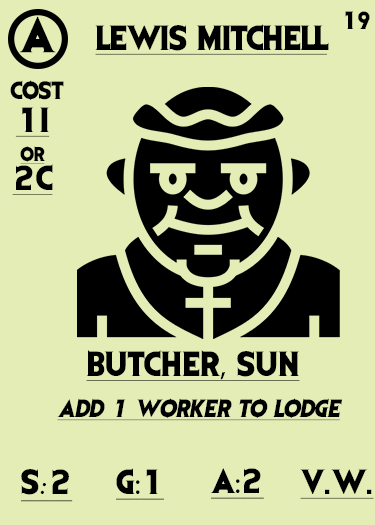
<style>
.page{position:relative;width:375px;height:525px;background:#e3edb5}
.page>*{position:absolute;margin:0}
.t1{font:41.7px "EvilDead";letter-spacing:-0.05em;color:#000000}
.t2{font:20.8px "EvilDead";letter-spacing:-0.1em;color:#000000}
.t3{font:29.2px "EvilDead";letter-spacing:-0.025em;color:#000000;text-decoration:underline}
.t4{font:20.8px "EvilDead";color:#000000}
.t5{font:29.2px/29.2px "EvilDead";color:#000000;text-decoration:underline}
.t6{font:16.7px/29.2px "EvilDead";color:#000000;text-decoration:underline}
.t7{font:29.2px "EvilDead";color:#000000;text-decoration:underline}
.t8{font:29.2px "MyriadPro-Regular";color:#000000;text-decoration:underline}
.t9{font:20.8px "EvilDead";color:#000000;font-style:italic;text-decoration:underline}
.t10{font:29.2px "Fadli-Script";color:#000000;text-decoration:underline}
</style>
<div class="page">
<p class="t1" style="left:19px;top:16px;width:37px;height:37px">A</p>
<p class="t2" style="left:345px;top:11px;width:25px;height:18px">19</p>
<p class="t3" style="left:95px;top:24px;width:234px;height:31px">LEWIS MITCHELL</p>
<p class="t4" style="left:10px;top:80px;width:54px;height:20px">COST</p>
<p class="t5" style="left:12px;top:107px;width:41px;height:88px;text-align:center">1I<br><span class="t6">or<br></span>2C</p>
<p class="t7" style="left:86px;top:350px;width:214px;height:31px">BUTCHER<span class="t8">,</span> SUN</p>
<p class="t9" style="left:57px;top:398px;width:285px;height:23px">Add 1 worker to lodge</p>
<p class="t7" style="left:21px;top:469px;width:52px;height:33px">S<span class="t10">:</span>2</p>
<p class="t7" style="left:116px;top:468px;width:49px;height:32px">G<span class="t8">:</span>1</p>
<p class="t7" style="left:210px;top:468px;width:54px;height:31px">A<span class="t8">:</span>2</p>
<p class="t7" style="left:300px;top:469px;width:74px;height:30px">V.W.</p>
</div>
